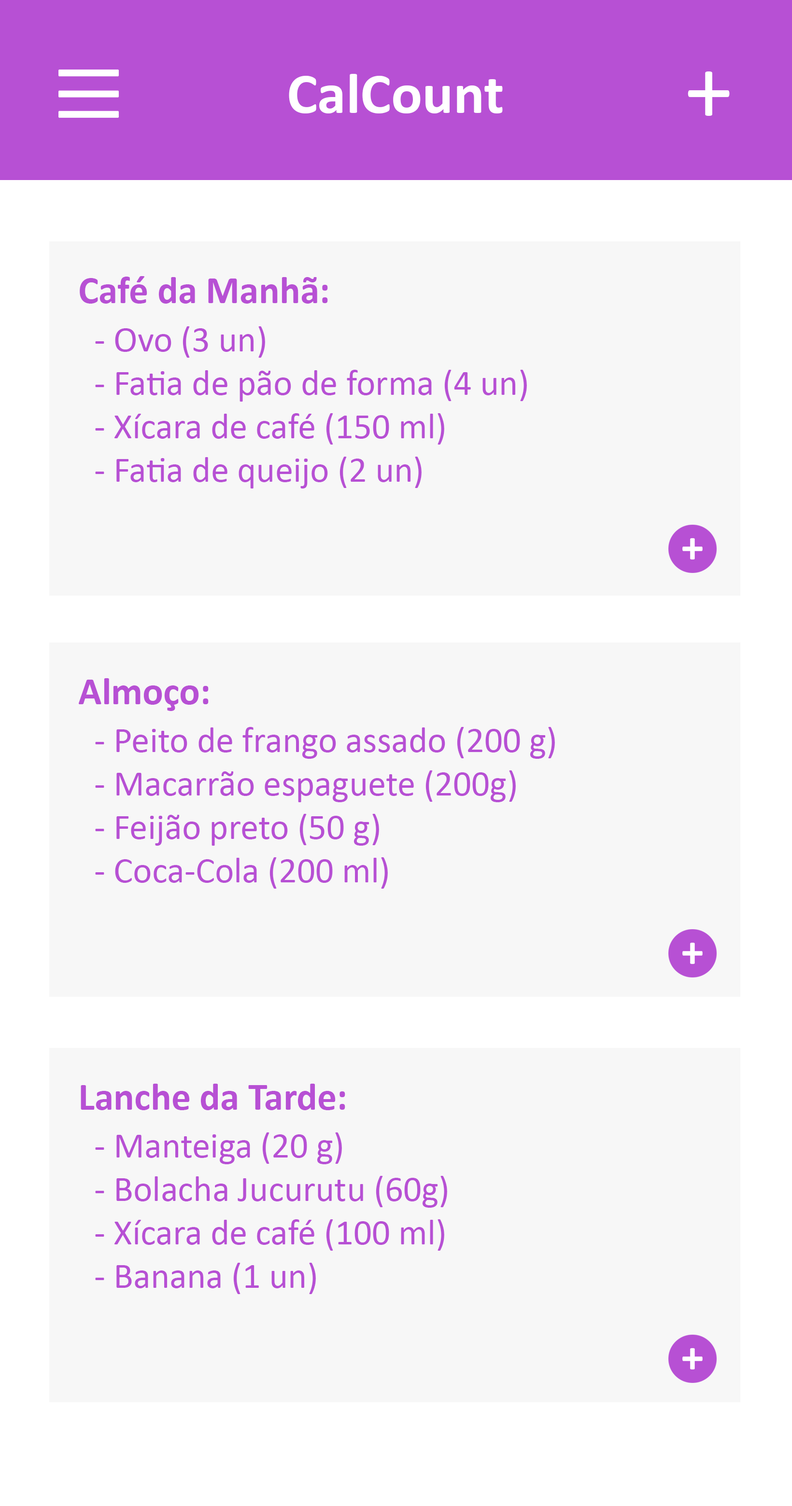
<style>
.page{position:relative;width:792px;height:1506px;background:#f7f7f7}
.page>*{position:absolute;margin:0}
.t1{font:57.9px "Calibri-Bold";color:#ffffff}
.t2{font:96.5px "Calibri";color:#ffffff}
.t3{font:38.6px "Calibri-Bold";color:#b750d4}
.t4{font:36.2px "Calibri";color:#b750d4}
</style>
<div class="page">
<p class="t1" style="left:289px;top:74px;width:214px;height:39px">CalCount</p>
<p class="t2" style="left:687px;top:71px;width:42px;height:45px">+</p>
<p class="t3" style="left:80px;top:276px;width:248px;height:28px">Café da Manhã:</p>
<p class="t4" style="left:95px;top:326px;width:432px;height:163px">- Ovo (3 un)<br>- Fatia de pão de forma (4 un)<br>- Xícara de café (150 ml)<br>- Fatia de queijo (2 un)</p>
<p class="t3" style="left:79px;top:678px;width:130px;height:33px">Almoço:</p>
<p class="t4" style="left:95px;top:727px;width:460px;height:162px">- Peito de frango assado (200 g)<br>- Macarrão espaguete (200g)<br>- Feijão preto (50 g)<br>- Coca-Cola (200 ml)</p>
<p class="t3" style="left:81px;top:1084px;width:264px;height:26px">Lanche da Tarde:</p>
<p class="t4" style="left:95px;top:1133px;width:352px;height:161px">- Manteiga (20 g)<br>- Bolacha Jucurutu (60g)<br>- Xícara de café (100 ml)<br>- Banana (1 un)</p>
</div>
